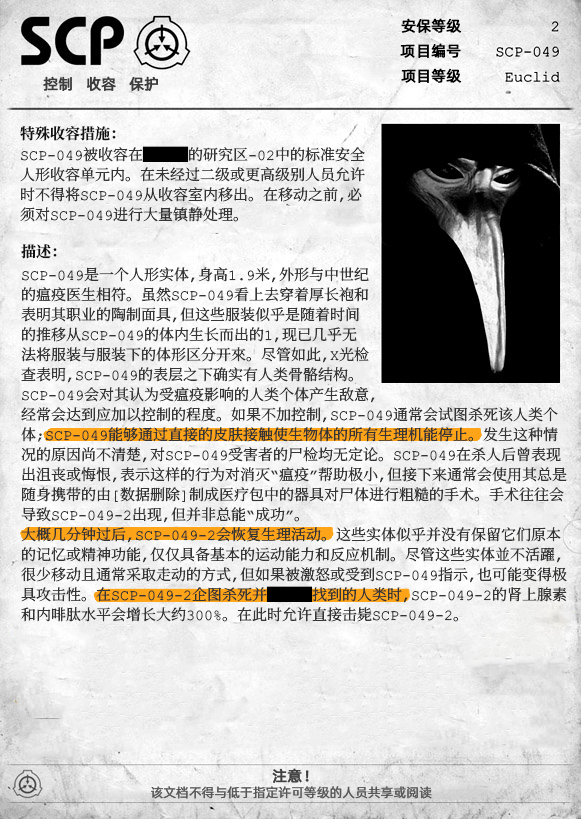
<style>
.page{position:relative;width:581px;height:819px}
.page>*{position:absolute;margin:0}
.t1{font:15px "AlibabaPuHuiTiR";color:#000000;font-weight:bold}
.t2{font:15px "AlibabaPuHuiTiR";color:#3d3d3d;font-weight:bold}
.t3{font:15px "ContainmentBreach-Bold";color:#121212}
.t4{font:15px/20px "ContainmentBreach-Regular";color:#353535}
.t5{font:15px/20px "ContainmentBreach-Regular";color:#000000}
.t6{font:15px "AlibabaPuHuiTiR";color:#414141;font-weight:bold}
.t7{font:13px "AlibabaPuHuiTiR";color:#575757}
</style>
<div class="page">
<p class="t1" style="left:401px;top:18px;width:61px;height:15px">安保等级</p>
<p class="t1" style="left:400px;top:43px;width:61px;height:15px">项目编号</p>
<p class="t2" style="left:43px;top:76px;width:115px;height:15px">控制   收容   保护</p>
<p class="t1" style="left:401px;top:68px;width:61px;height:15px">项目等级</p>
<p class="t3" style="left:20px;top:126px;width:96px;height:15px">特殊收容措施：</p>
<p class="t4" style="left:20px;top:146px;width:345px;height:76px">SCP-049被收容在<span class="t5">███</span>的研究区-02中的标准安全<br>人形收容单元内。在未经过二级或更高级别人员允许<br>时不得将SCP-049从收容室内移出。在移动之前，必<br>须对SCP-049进行大量镇静处理。</p>
<p class="t3" style="left:21px;top:244px;width:36px;height:15px">描述：</p>
<p class="t4" style="left:21px;top:267px;width:546px;height:355px">SCP-049是一个人形实体，身高1.9米，外形与中世纪<br>的瘟疫医生相符。虽然SCP-049看上去穿着厚长袍和<br>表明其职业的陶制面具，但这些服装似乎是随着时间<br>的推移从SCP-049的体内生长而出的1，现已几乎无<br>法将服装与服装下的体形区分开來。尽管如此，X光检<br>查表明，SCP-049的表层之下确实有人类骨骼结构。<br>SCP-049会对其认为受瘟疫影响的人类个体产生敌意，<br>经常会达到应加以控制的程度。如果不加控制，SCP-049通常会试图杀死该人类个<br>体；SCP-049能够通过直接的皮肤接触使生物体的所有生理机能停止。发生这种情<br>况的原因尚不清楚，对SCP-049受害者的尸检均无定论。SCP-049在杀人后曾表现<br>出沮丧或悔恨，表示这样的行为对消灭“瘟疫”帮助极小，但接下来通常会使用其总是<br>随身携带的由[数据删除]制成医疗包中的器具对尸体进行粗糙的手术。手术往往会<br>导致SCP-049-2出现，但并非总能“成功”。<br>大概几分钟过后，SCP-049-2会恢复生理活动。这些实体似乎并没有保留它们原本<br>的记忆或精神功能，仅仅具备基本的运动能力和反应机制。尽管这些实体並不活躍，<br>很少移动且通常采取走动的方式，但如果被激怒或受到SCP-049指示，也可能变得极<br>具攻击性。在SCP-049-2企图杀死并<span class="t5">███</span>找到的人类时，SCP-049-2的肾上腺素<br>和内啡肽水平会增长大约300%。在此时允许直接击毙SCP-049-2。</p>
<p class="t6" style="left:272px;top:768px;width:37px;height:15px">注意！</p>
<p class="t7" style="left:151px;top:786px;width:281px;height:13px">该文档不得与低于指定许可等级的人员共享或阅读</p>
</div>
